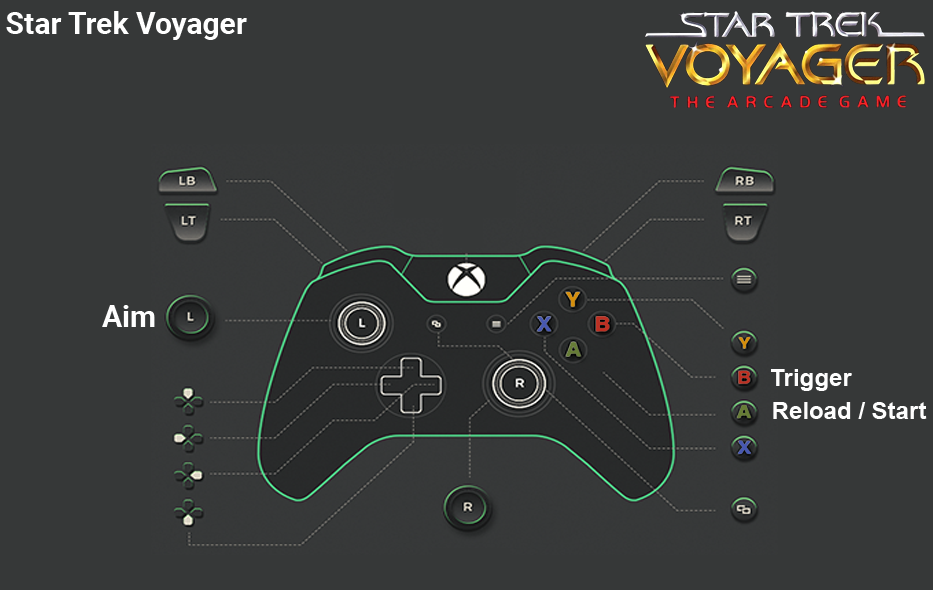
<style>
.page{position:relative;width:933px;height:590px;background:#363838}
.page>*{position:absolute;margin:0}
.t1{font:30px "Roboto-Bold";color:#ffffff}
.t2{font:30px "Roboto-Bold";color:#fefefe}
.t3{font:24px "Arial-BoldMT";color:#fefefe}
</style>
<div class="page">
<p class="t1" style="left:6px;top:11px;width:241px;height:29px">Star Trek Voyager</p>
<p class="t2" style="left:102px;top:305px;width:53px;height:22px">Aim</p>
<p class="t3" style="left:771px;top:369px;width:81px;height:22px">Trigger</p>
<p class="t3" style="left:773px;top:402px;width:154px;height:17px">Reload / Start</p>
</div>
